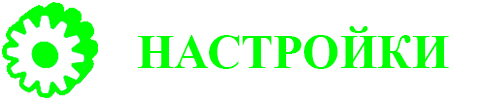
<style>
.page{position:relative;width:500px;height:100px;background:#ffffff}
.page>*{position:absolute;margin:0}
.t1{font:48px "TimesNewRomanPS-BoldMT";color:#00ff00}
</style>
<div class="page">
<p class="t1" style="left:137px;top:26px;width:312px;height:43px">НАСТРОЙКИ</p>
</div>
